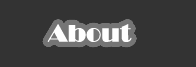
<style>
.page{position:relative;width:196px;height:67px;background:#333333}
.page>*{position:absolute;margin:0}
.t1{font:25px "Broadway";color:#ffffff}
</style>
<div class="page">
<p class="t1" style="left:47px;top:24px;width:85px;height:18px">About</p>
</div>
